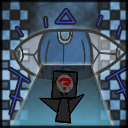
<style>
.page{position:relative;width:128px;height:128px}
.page>*{position:absolute;margin:0}
.t1{font:12px "M41_LOVEBIT";color:#740000}
</style>
<div class="page">
<p class="t1" style="left:58px;top:78px;width:13px;height:12px">?</p>
</div>
